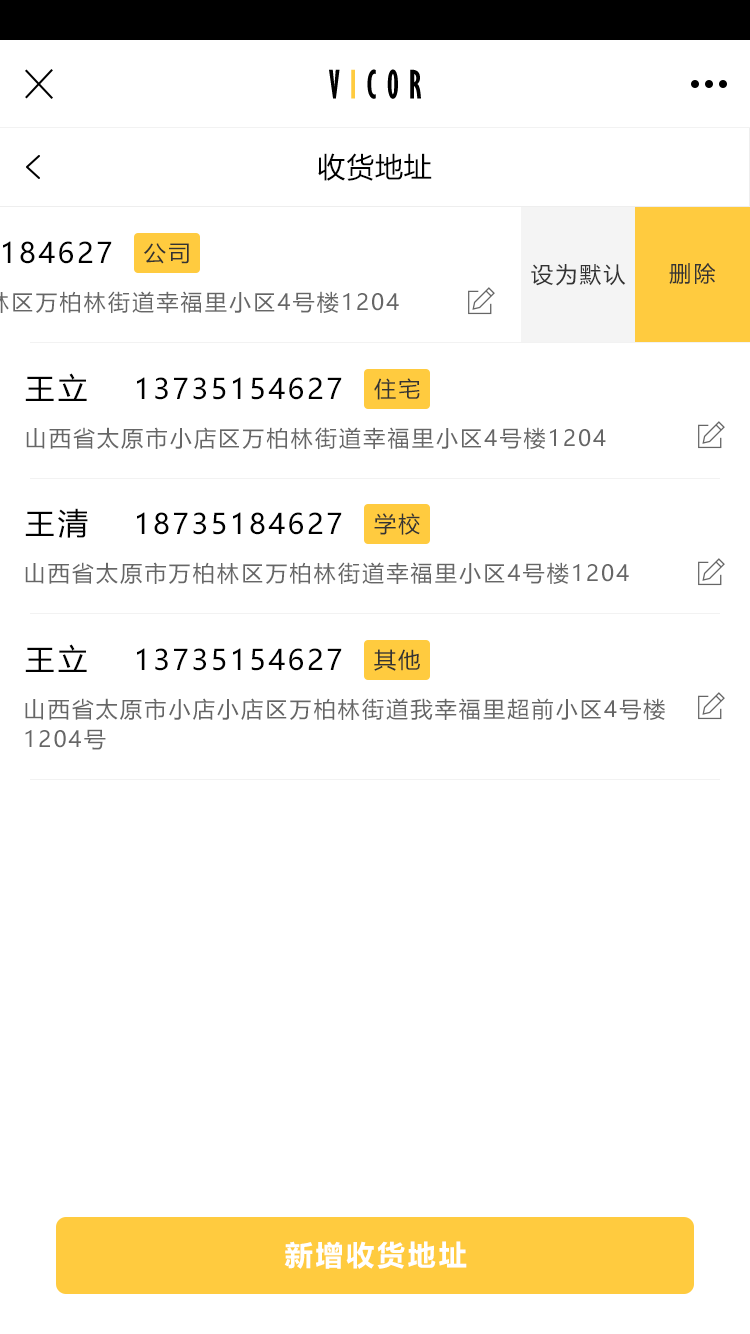
<style>
.page{position:relative;width:750px;height:1334px;background:#ffffff}
.page>*{position:absolute;margin:0}
.t1{font:36px "GillSansMT-ExtraCondensedBold";letter-spacing:0.3em;color:#000000;text-transform:uppercase}
.t2{font:36px "GillSansMT-ExtraCondensedBold";letter-spacing:0.3em;color:#ffcb3f;text-transform:uppercase}
.t3{font:28px "MicrosoftYaHei";letter-spacing:0.03em;color:#000000;text-transform:uppercase}
.t4{font:22px "MicrosoftYaHei";letter-spacing:0.1em;color:#333333;text-transform:uppercase}
.t5{font:30px "MicrosoftYaHei";letter-spacing:0.1em;color:#000000;text-transform:uppercase}
.t6{font:28px "MicrosoftYaHei";letter-spacing:0.1em;color:#000000;text-transform:uppercase}
.t7{font:22px "MicrosoftYaHei";letter-spacing:0.1em;color:#666666;text-transform:uppercase}
.t8{font:22px/30px "MicrosoftYaHei";letter-spacing:0.1em;color:#666666;text-transform:uppercase}
.t9{font:28px "MicrosoftYaHei-Bold";letter-spacing:0.1em;color:#ffffff;text-transform:uppercase}
</style>
<div class="page">
<p class="t1" style="left:329px;top:69px;width:92px;height:30px">v<span class="t2">i</span>cor</p>
<p class="t3" style="left:318px;top:153px;width:114px;height:28px">收货地址</p>
<p class="t4" style="left:144px;top:243px;width:45px;height:21px">公司</p>
<p class="t4" style="left:531px;top:264px;width:95px;height:22px">设为默认</p>
<p class="t4" style="left:669px;top:263px;width:47px;height:21px">删除</p>
<p class="t5" style="left:25px;top:373px;width:62px;height:28px">王立</p>
<p class="t6" style="left:137px;top:377px;width:205px;height:23px">13735154627</p>
<p class="t4" style="left:374px;top:378px;width:46px;height:22px">住宅</p>
<p class="t7" style="left:26px;top:427px;width:580px;height:22px">山西省太原市小店区万柏林街道幸福里小区4号楼1204</p>
<p class="t5" style="left:25px;top:508px;width:63px;height:30px">王清</p>
<p class="t6" style="left:137px;top:512px;width:205px;height:23px">18735184627</p>
<p class="t4" style="left:374px;top:513px;width:46px;height:22px">学校</p>
<p class="t7" style="left:25px;top:562px;width:604px;height:22px">山西省太原市万柏林区万柏林街道幸福里小区4号楼1204</p>
<p class="t5" style="left:25px;top:644px;width:62px;height:28px">王立</p>
<p class="t6" style="left:137px;top:648px;width:205px;height:23px">13735154627</p>
<p class="t4" style="left:374px;top:649px;width:46px;height:22px">其他</p>
<p class="t8" style="left:25px;top:698px;width:640px;height:52px">山西省太原市小店小店区万柏林街道我幸福里超前小区4号楼<br>1204号</p>
<p class="t9" style="left:284px;top:1241px;width:183px;height:28px">新增收货地址</p>
</div>
